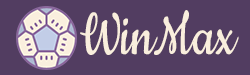
<style>
.page{position:relative;width:250px;height:75px;background:#523d61}
.page>*{position:absolute;margin:0}
.t1{font:66.8px "Cookie-Regular";color:#f9eedd;scale:0.9 1}
</style>
<div class="page">
<p class="t1" style="left:80px;top:10px;width:159px;height:45px">WinMax</p>
</div>
